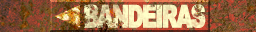
<style>
.page{position:relative;width:256px;height:32px}
.page>*{position:absolute;margin:0}
.t1{font:30.7px "Arial-Black";letter-spacing:-0.1em;color:#f6edb9;text-transform:uppercase;font-weight:bold;scale:0.67 1}
</style>
<div class="page">
<p class="t1" style="left:84px;top:4px;width:122px;height:24px">bandeiras</p>
</div>
